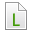
<style>
.page{position:relative;width:32px;height:32px;background:#ffffff}
.page>*{position:absolute;margin:0}
.t1{font:18px "Lato-Regular";color:#3c9700;scale:0.9 1}
</style>
<div class="page">
<p class="t1" style="left:13px;top:13px;width:7px;height:13px">L</p>
</div>
